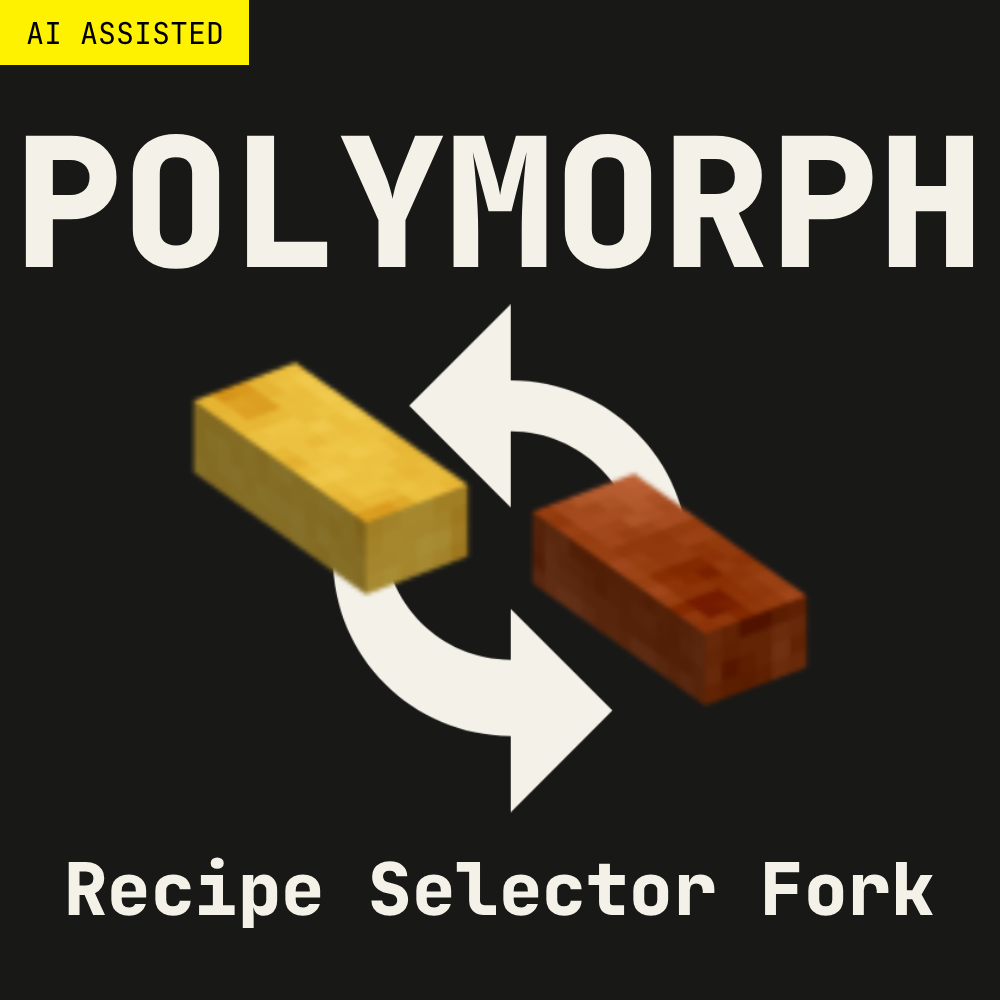
<style>
.page{position:relative;width:1000px;height:1000px;background:#181817}
.page>*{position:absolute;margin:0}
.t1{font:30px "JetBrainsMonoRoman-Regular";color:#000000}
.t2{font:179.8px "JetBrainsMonoRoman-ExtraBold";color:#f4f1e8}
.t3{font:72.5px "JetBrainsMonoRoman-ExtraBold";color:#f4f1e8}
</style>
<div class="page">
<p class="t1" style="left:27px;top:21px;width:195px;height:24px">AI ASSISTED</p>
<p class="t2" style="left:25px;top:133px;width:949px;height:136px">POLYMORPH</p>
<p class="t3" style="left:68px;top:857px;width:865px;height:71px">Recipe Selector Fork</p>
</div>
